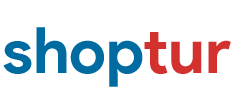
<style>
.page{position:relative;width:233px;height:108px;background:#ffffff}
.page>*{position:absolute;margin:0}
.t1{font:64px "ProductSans-Bold";color:#006ba1}
.t2{font:64px "ProductSans-Bold";color:#d2312d}
</style>
<div class="page">
<p class="t1" style="left:3px;top:27px;width:228px;height:60px">shop<span class="t2">tur</span></p>
</div>
